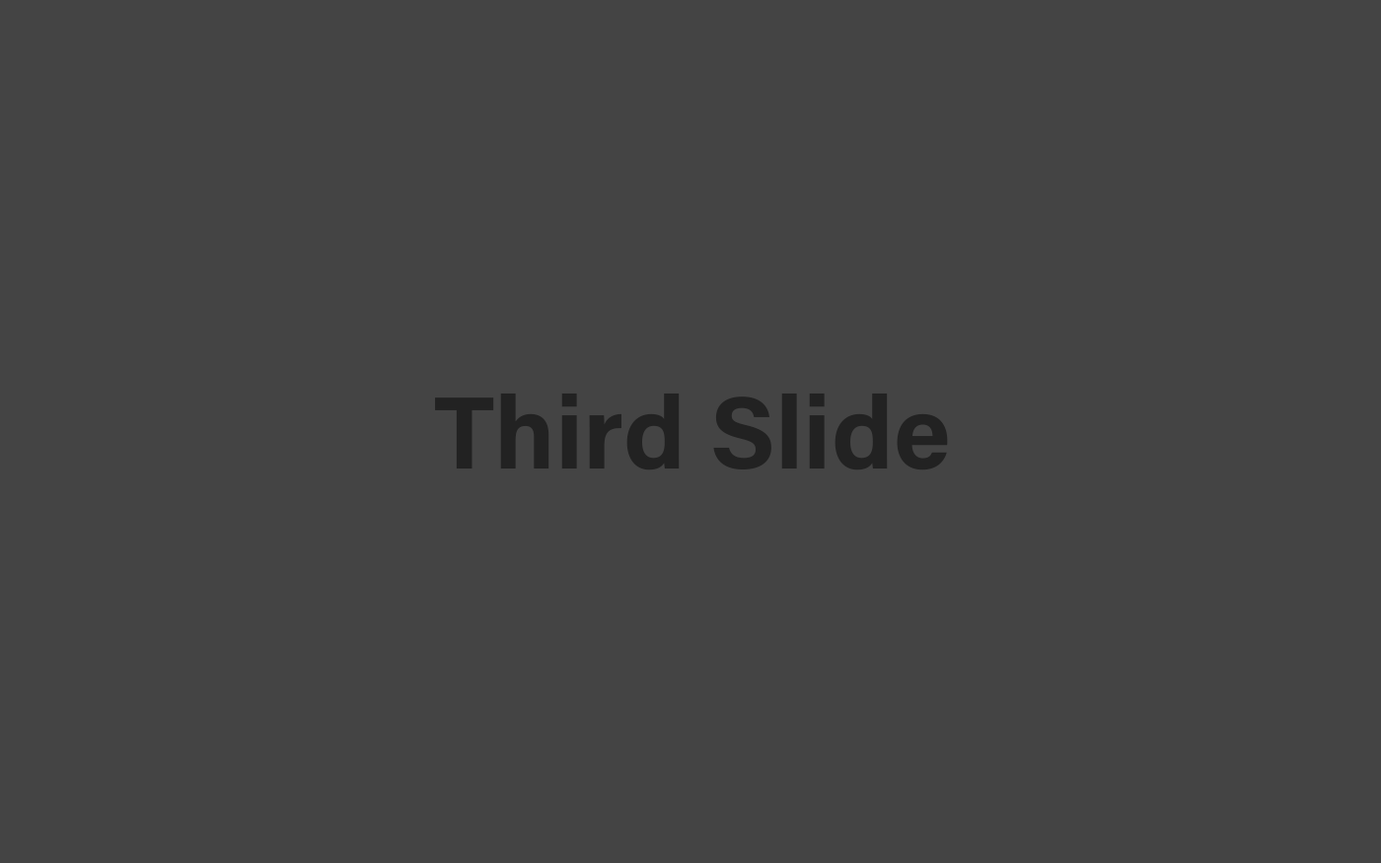
<style>
.page{position:relative;width:1381px;height:863px;background:#444444}
.page>*{position:absolute;margin:0}
.t1{font:102.8px "AcuminConcept-Bold";color:#222222}
</style>
<div class="page">
<p class="t1" style="left:435px;top:393px;width:513px;height:78px">Third Slide</p>
</div>
